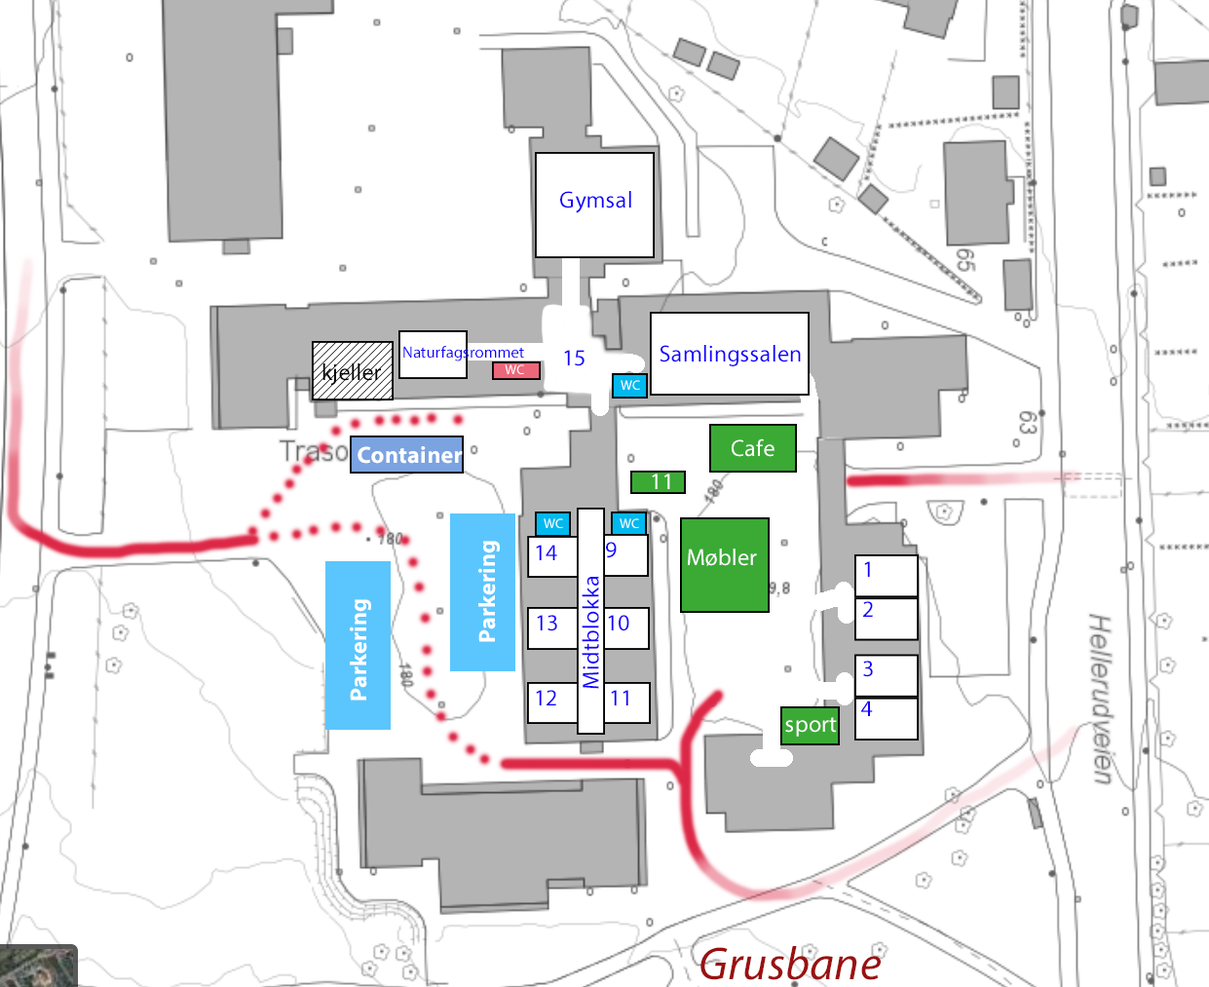
<style>
.page{position:relative;width:1209px;height:987px;background:#ffffff}
.page>*{position:absolute;margin:0}
.t1{font:23.4px "MyriadPro-Regular";letter-spacing:0.005em;color:#1200ff}
.t2{font:16.1px "MyriadPro-Regular";letter-spacing:0.005em;color:#1200ff}
.t3{font:23.4px "MyriadPro-Regular";letter-spacing:0.005em;color:#000000}
.t4{font:13.6px "MyriadPro-Regular";letter-spacing:0.005em;color:#ffffff}
.t5{font:23.4px "MyriadPro-Bold";letter-spacing:0.005em;color:#ffffff}
.t6{font:23.4px "MyriadPro-Regular";letter-spacing:0.005em;color:#ffffff}
.t7{font:23.4px "MyriadPro-Regular";letter-spacing:0.005em;color:#1100ff}
.t8{font:46.7px "MyriadPro-It";letter-spacing:0.005em;color:#9b1010}
</style>
<div class="page">
<p class="t1" style="left:560px;top:191px;width:71px;height:22px">Gymsal</p>
<p class="t2" style="left:403px;top:346px;width:121px;height:15px">Naturfagsrommet</p>
<p class="t1" style="left:564px;top:350px;width:20px;height:16px">15</p>
<p class="t1" style="left:659px;top:345px;width:142px;height:21px">Samlingssalen</p>
<p class="t3" style="left:322px;top:363px;width:59px;height:22px">kjeller</p>
<p class="t4" style="left:504px;top:364px;width:20px;height:10px">WC</p>
<p class="t4" style="left:620px;top:380px;width:20px;height:10px">WC</p>
<p class="t5" style="left:357px;top:446px;width:106px;height:18px">Container</p>
<p class="t6" style="left:731px;top:438px;width:43px;height:19px">Cafe</p>
<p class="t6" style="left:652px;top:473px;width:18px;height:16px">11</p>
<p class="t4" style="left:543px;top:518px;width:20px;height:10px">WC</p>
<p class="t4" style="left:619px;top:518px;width:20px;height:10px">WC</p>
<p class="t5" style="left:478px;top:541px;width:22px;height:101px;rotate:-90deg">Parkering</p>
<p class="t7" style="left:536px;top:544px;width:21px;height:16px">14</p>
<p class="t1" style="left:606px;top:542px;width:10px;height:16px">9</p>
<p class="t6" style="left:688px;top:548px;width:69px;height:18px">Møbler</p>
<p class="t1" style="left:864px;top:561px;width:6px;height:16px">1</p>
<p class="t1" style="left:581px;top:576px;width:18px;height:113px;rotate:-90deg">Midtblokka</p>
<p class="t5" style="left:350px;top:599px;width:21px;height:101px;rotate:-90deg">Parkering</p>
<p class="t1" style="left:863px;top:601px;width:10px;height:15px">2</p>
<p class="t1" style="left:537px;top:615px;width:20px;height:16px">13</p>
<p class="t1" style="left:608px;top:615px;width:21px;height:16px">10</p>
<p class="t1" style="left:863px;top:660px;width:10px;height:17px">3</p>
<p class="t7" style="left:536px;top:690px;width:20px;height:15px">12</p>
<p class="t7" style="left:611px;top:690px;width:17px;height:15px">11</p>
<p class="t1" style="left:861px;top:700px;width:12px;height:16px">4</p>
<p class="t6" style="left:785px;top:717px;width:52px;height:19px">sport</p>
<p class="t8" style="left:700px;top:946px;width:180px;height:34px">Grusbane</p>
</div>
